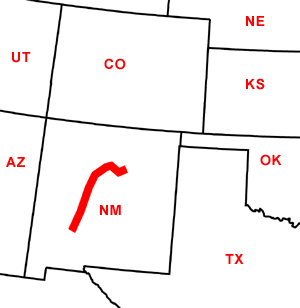
<style>
.page{position:relative;width:300px;height:308px;background:#ffffff}
.page>*{position:absolute;margin:0}
.t1{font:14px "Arial-BoldMT";letter-spacing:0.05em;color:#ff0000}
</style>
<div class="page">
<p class="t1" style="left:246px;top:16px;width:19px;height:10px">NE</p>
<p class="t1" style="left:12px;top:52px;width:19px;height:11px">UT</p>
<p class="t1" style="left:104px;top:58px;width:22px;height:12px">CO</p>
<p class="t1" style="left:246px;top:78px;width:19px;height:12px">KS</p>
<p class="t1" style="left:6px;top:157px;width:19px;height:10px">AZ</p>
<p class="t1" style="left:260px;top:154px;width:22px;height:12px">OK</p>
<p class="t1" style="left:100px;top:205px;width:21px;height:10px">NM</p>
<p class="t1" style="left:225px;top:254px;width:19px;height:10px">TX</p>
</div>
